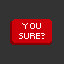
<style>
.page{position:relative;width:64px;height:64px;background:#333333}
.page>*{position:absolute;margin:0}
.t1{font:13px/10.8px "MunroSmall";color:#ffffff}
</style>
<div class="page">
<p class="t1" style="left:19px;top:23px;width:26px;height:16px;text-align:center">You<br>sure?</p>
</div>
